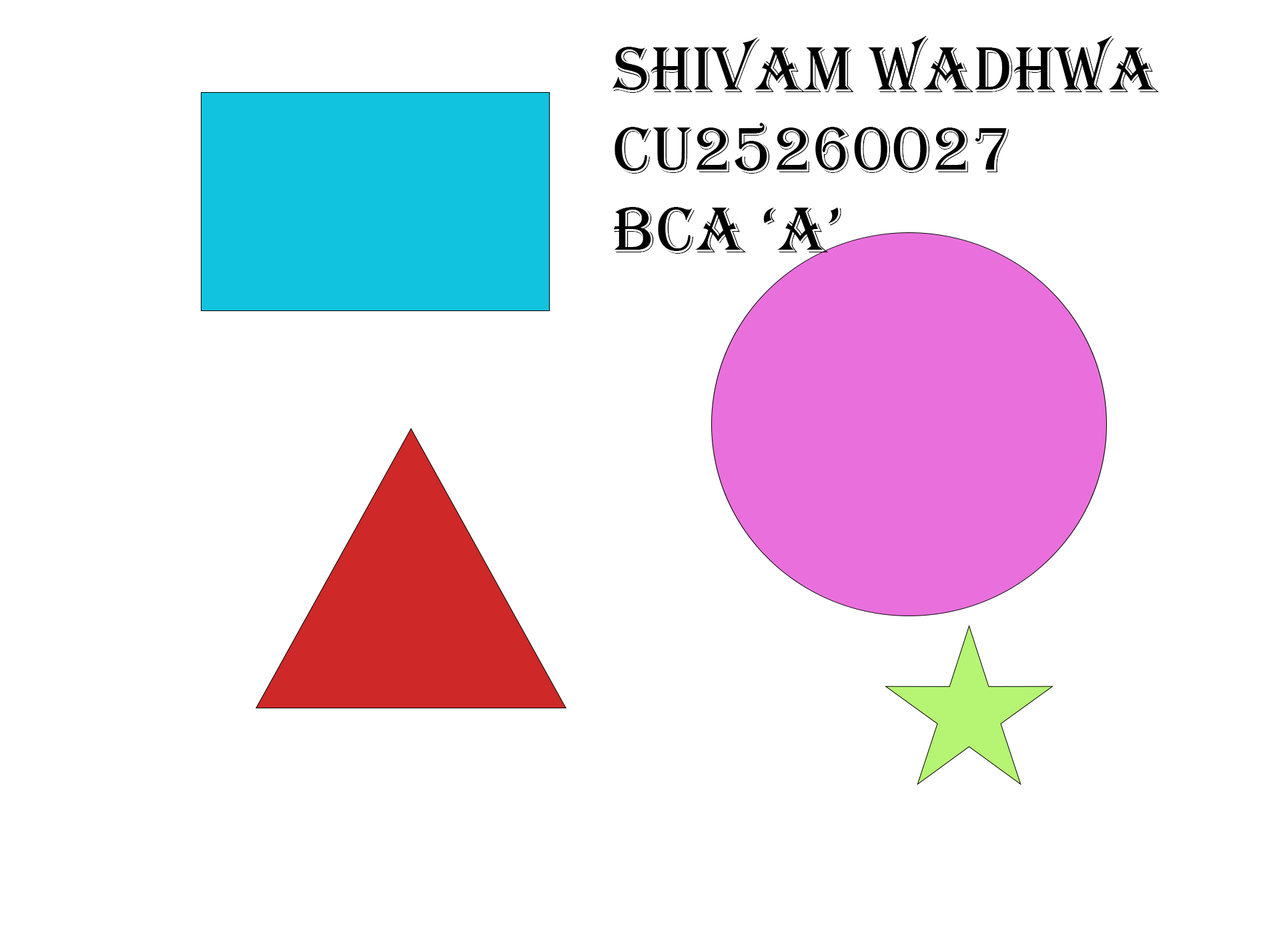
<style>
.page{position:relative;width:1261px;height:946px;background:#ffffff}
.page>*{position:absolute;margin:0}
.t1{font:66.7px "Algerian";color:#000000}
</style>
<div class="page">
<p class="t1" style="left:613px;top:35px;width:546px;height:219px">SHIVAM WADHWA<br>CU25260027<br>BCA ‘A’</p>
</div>
